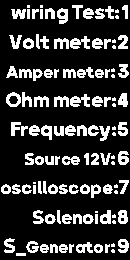
<style>
.page{position:relative;width:130px;height:260px;background:#000000}
.page>*{position:absolute;margin:0}
.t1{font:19.8px/29.2px "Kalameh-ExtraBold";letter-spacing:-0.01em;color:#ffffff;scale:1.04 1}
.t2{font:16.5px/29.2px "Kalameh-ExtraBold";letter-spacing:-0.01em;color:#ffffff;scale:1.04 1}
.t3{font:17.8px/29.2px "Kalameh-ExtraBold";letter-spacing:-0.01em;color:#ffffff;scale:1.04 1}
.t4{font:18.4px/29.2px "Kalameh-ExtraBold";letter-spacing:-0.01em;color:#ffffff;scale:1.04 1}
</style>
<div class="page">
<p class="t1" style="left:1px;top:5px;width:128px;height:251px">1:wiring Test<br>2:Volt meter<br>3:<span class="t2">Amper meter<br></span>4:Ohm meter<br>5:Frequency<br>6:<span class="t2">Source 12V<br></span>7:<span class="t3">oscilloscope<br></span>8:<span class="t4">Solenoid <br></span>9:S_<span class="t2">Generator</span></p>
</div>
